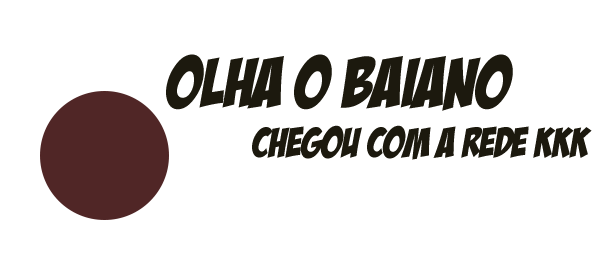
<style>
.page{position:relative;width:600px;height:266px;background:#ffffff}
.page>*{position:absolute;margin:0}
.t1{font:41.7px "BadaBoomBB";color:#1c190e;text-transform:uppercase}
.t2{font:69.4px "BadaBoomBB";color:#1c190e;text-transform:uppercase}
</style>
<div class="page">
<p class="t1" style="left:166px;top:54px;width:426px;height:106px;text-align:center"><span class="t2">olha o baiano <br></span>chegou com a rede kkk</p>
</div>
